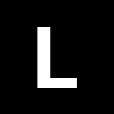
<style>
.page{position:relative;width:114px;height:114px;background:#000000}
.page>*{position:absolute;margin:0}
.t1{font:85.7px "Roboto-Bold";color:#ffffff;text-transform:uppercase}
</style>
<div class="page">
<p class="t1" style="left:37px;top:27px;width:40px;height:61px">L</p>
</div>
